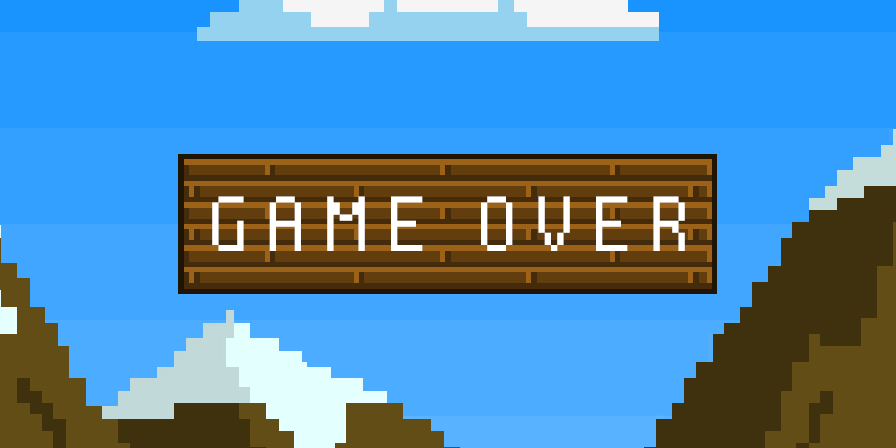
<style>
.page{position:relative;width:896px;height:448px}
.page>*{position:absolute;margin:0}
.t1{font:97px "Nine-By-Five-NBP";letter-spacing:0.2em;color:#ffffff;scale:1.03 1}
</style>
<div class="page">
<p class="t1" style="left:212px;top:196px;width:473px;height:55px">GAME OVER</p>
</div>
